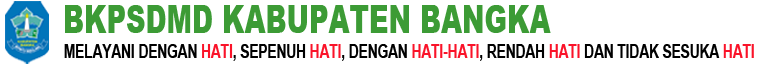
<style>
.page{position:relative;width:763px;height:65px;background:#ffffff}
.page>*{position:absolute;margin:0}
.t1{font:37.8px "Arial-Black";color:#3c9b35;scale:0.71 1}
.t2{font:18.8px "Arial-BoldMT";color:#000000;scale:0.72 1}
.t3{font:18.8px "Arial-BoldMT";color:#fa1329;scale:0.72 1}
</style>
<div class="page">
<p class="t1" style="left:65px;top:5px;width:486px;height:28px">BKPSDMD KABUPATEN BANGKA</p>
<p class="t2" style="left:64px;top:44px;width:690px;height:17px">MELAYANI DENGAN <span class="t3">HATI</span>, SEPENUH <span class="t3">HATI</span>, DENGAN <span class="t3">HATI-HATI</span>, RENDAH <span class="t3">HATI </span>DAN TIDAK SESUKA <span class="t3">HATI</span></p>
</div>
